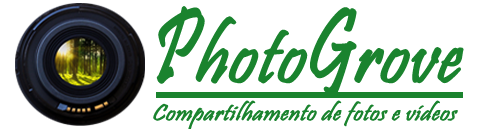
<style>
.page{position:relative;width:482px;height:129px;background:#ffffff}
.page>*{position:absolute;margin:0}
.t1{font:78px "Pristina-Regular";letter-spacing:0.005em;color:#1a832e;font-weight:bold;font-style:italic;scale:0.96 1}
.t2{font:108px "Pristina-Regular";letter-spacing:0.005em;color:#1a832e;font-weight:bold;font-style:italic;scale:0.7 1}
.t3{font:23.4px "Pristina-Regular";letter-spacing:0.005em;color:#1a832e;font-weight:bold;font-style:italic;scale:1.08 1}
</style>
<div class="page">
<p class="t1" style="left:156px;top:6px;width:308px;height:91px"><span class="t2">P</span>hoto<span class="t2">G</span>rove</p>
<p class="t3" style="left:153px;top:100px;width:305px;height:31px">Compartilhamento de fotos e vídeos</p>
</div>
